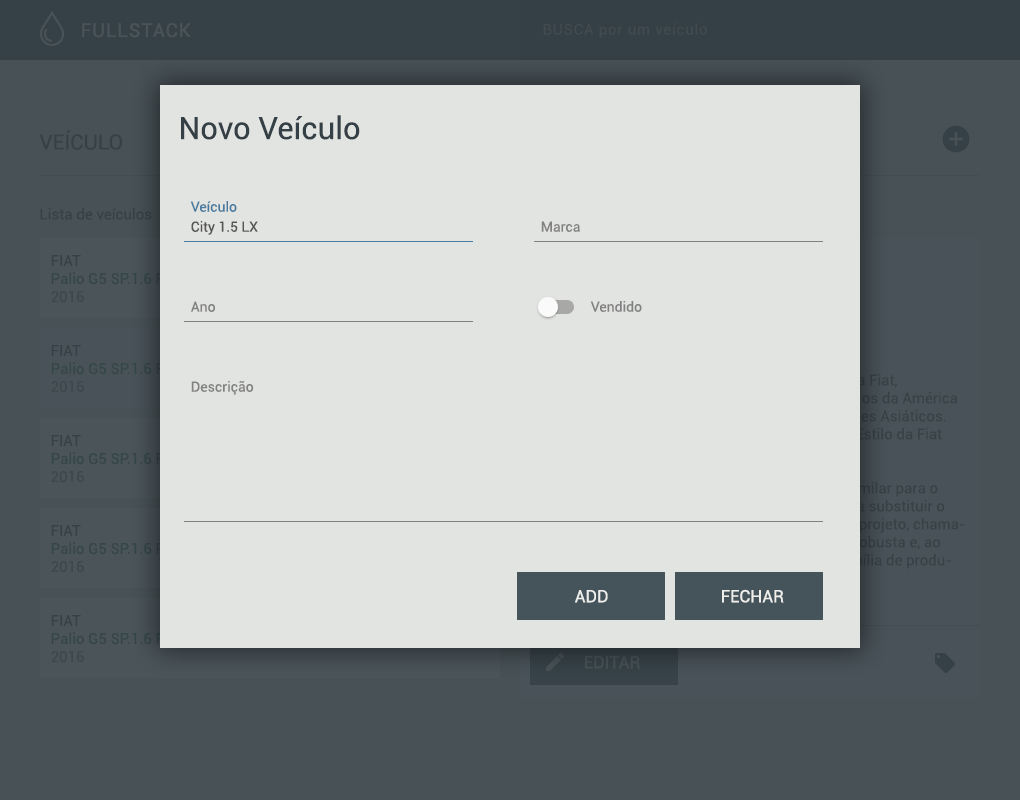
<style>
.page{position:relative;width:1020px;height:800px;background:#e2e4e1}
.page>*{position:absolute;margin:0}
.t1{font:19px "Roboto-Regular";letter-spacing:0.05em;color:#495358}
.t2{font:15px "Roboto-Regular";letter-spacing:0.05em;color:#414b50}
.t3{font:31px "Roboto-Regular";color:#353f46}
.t4{font:21px "Roboto-Regular";color:#364147}
.t5{font:15px "Roboto-Regular";color:#364147}
.t6{font:14px "Roboto-Regular";color:#487b9e}
.t7{font:14px "Roboto-Regular";color:#555555}
.t8{font:14px "Roboto-Regular";color:#818181}
.t9{font:17px "Roboto-Regular";color:#eeefed}
.t10{font:17px "Roboto-Regular";color:#414a4e}
</style>
<div class="page">
<p class="t1" style="left:82px;top:23px;width:109px;height:15px">FULLSTACK</p>
<p class="t2" style="left:543px;top:23px;width:164px;height:15px">BUSCA por um veículo</p>
<p class="t3" style="left:181px;top:115px;width:179px;height:25px">Novo Veículo</p>
<p class="t4" style="left:39px;top:130px;width:83px;height:20px">VEÍCULO</p>
<p class="t5" style="left:40px;top:208px;width:112px;height:12px">Lista de veículos</p>
<p class="t6" style="left:190px;top:201px;width:47px;height:11px">Veículo</p>
<p class="t7" style="left:191px;top:221px;width:67px;height:14px">City 1.5 LX</p>
<p class="t8" style="left:541px;top:221px;width:39px;height:11px">Marca</p>
<p class="t8" style="left:191px;top:301px;width:24px;height:11px">Ano</p>
<p class="t8" style="left:590px;top:301px;width:52px;height:11px">Vendido</p>
<p class="t8" style="left:191px;top:381px;width:63px;height:14px">Descrição</p>
<p class="t9" style="left:575px;top:590px;width:33px;height:13px">ADD</p>
<p class="t9" style="left:722px;top:589px;width:62px;height:14px">FECHAR</p>
<p class="t10" style="left:585px;top:656px;width:55px;height:13px">EDITAR</p>
</div>
